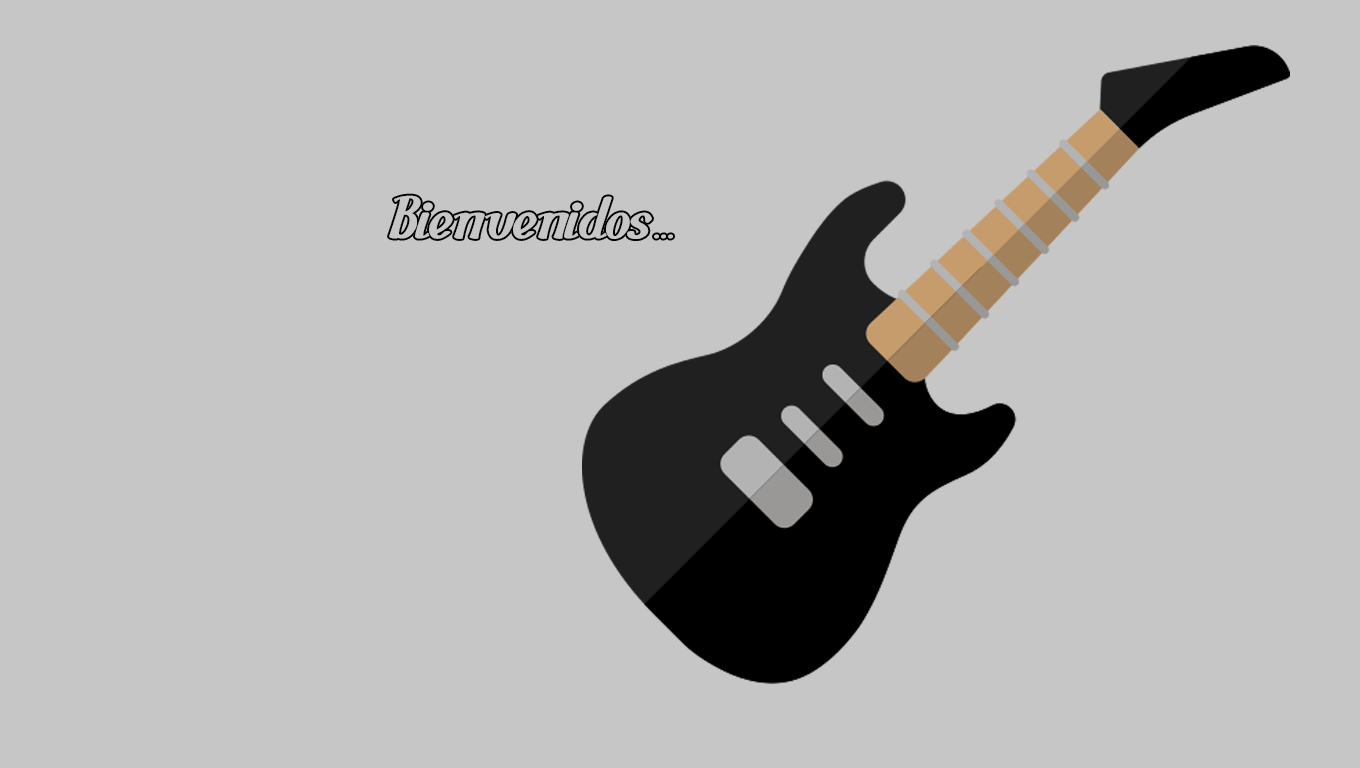
<style>
.page{position:relative;width:1360px;height:768px;background:#c6c6c6}
.page>*{position:absolute;margin:0}
.t1{font:72px "GuitarRumble";color:#c6c6c6}
</style>
<div class="page">
<p class="t1" style="left:389px;top:195px;width:284px;height:44px">Bienvenidos...</p>
</div>
